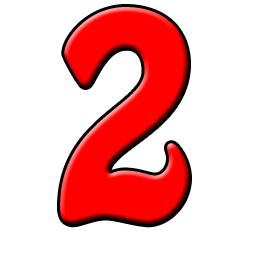
<style>
.page{position:relative;width:256px;height:256px;background:#ffffff}
.page>*{position:absolute;margin:0}
.t1{font:250px "HoboStd";color:#ff0000;font-weight:bold}
</style>
<div class="page">
<p class="t1" style="left:60px;top:7px;width:129px;height:218px">2</p>
</div>
